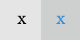
<style>
.page{position:relative;width:80px;height:40px;background:#e5e5e5}
.page>*{position:absolute;margin:0}
.t1{font:18px "FootlightMTLight";color:#090909}
.t2{font:18px "FootlightMTLight";color:#3a8dd3}
</style>
<div class="page">
<p class="t1" style="left:17px;top:15px;width:10px;height:9px">x</p>
<p class="t2" style="left:56px;top:15px;width:10px;height:9px">x</p>
</div>
